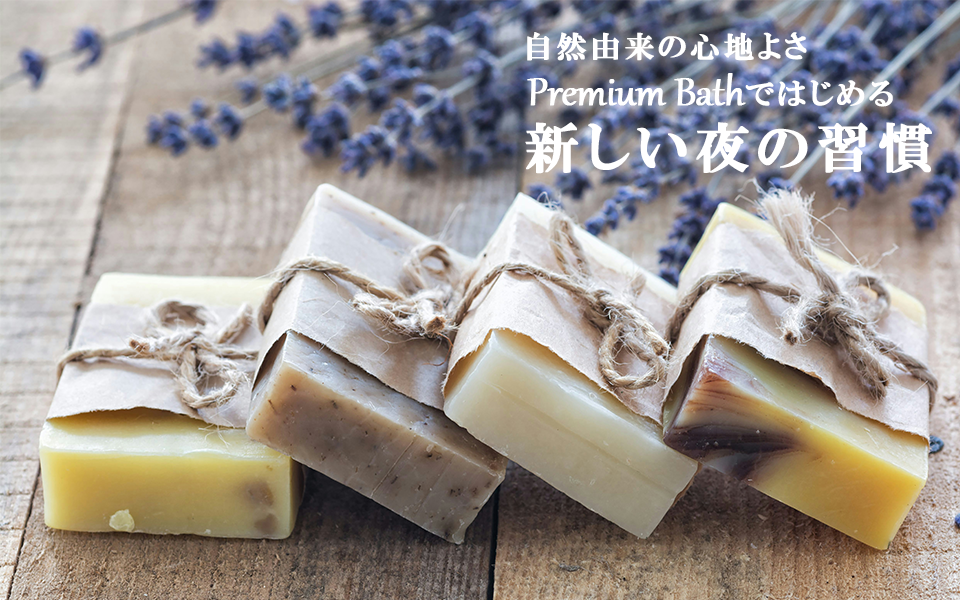
<style>
.page{position:relative;width:960px;height:600px}
.page>*{position:absolute;margin:0}
.t1{font:30px "HGPMinchoE";letter-spacing:0.1em;color:#ffffff;font-weight:bold}
.t2{font:48px "Gabriola";letter-spacing:-0.025em;color:#ffffff;font-weight:bold}
.t3{font:55px "HGPMinchoE";letter-spacing:0.1em;color:#ffffff;font-weight:bold}
</style>
<div class="page">
<p class="t1" style="left:527px;top:32px;width:280px;height:29px">自然由来の心地よさ</p>
<p class="t2" style="left:527px;top:73px;width:219px;height:33px">Premium Bath</p>
<p class="t1" style="left:745px;top:80px;width:148px;height:27px">ではじめる</p>
<p class="t3" style="left:525px;top:122px;width:407px;height:52px">新しい夜の習慣</p>
</div>
